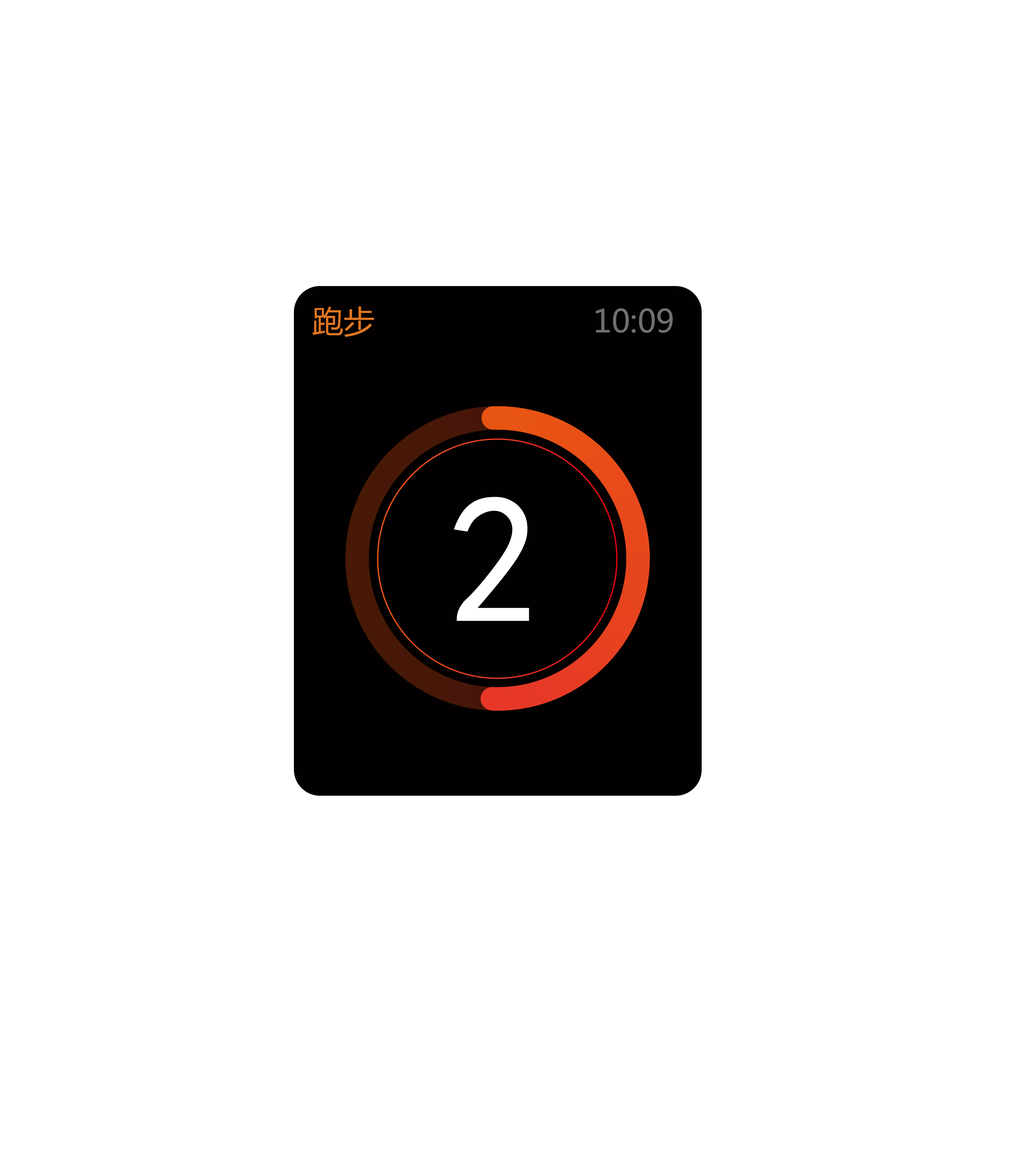
<style>
.page{position:relative;width:1026px;height:1163px;background:#ffffff}
.page>*{position:absolute;margin:0}
.t1{font:31.4px "MicrosoftYaHei";color:#e1761f}
.t2{font:31.4px "MicrosoftYaHei";color:#717071}
.t3{font:182.9px "SimHei";color:#ffffff}
</style>
<div class="page">
<p class="t1" style="left:312px;top:306px;width:62px;height:31px">跑步</p>
<p class="t2" style="left:595px;top:308px;width:78px;height:25px">10:09</p>
<p class="t3" style="left:454px;top:497px;width:75px;height:124px">2</p>
</div>
